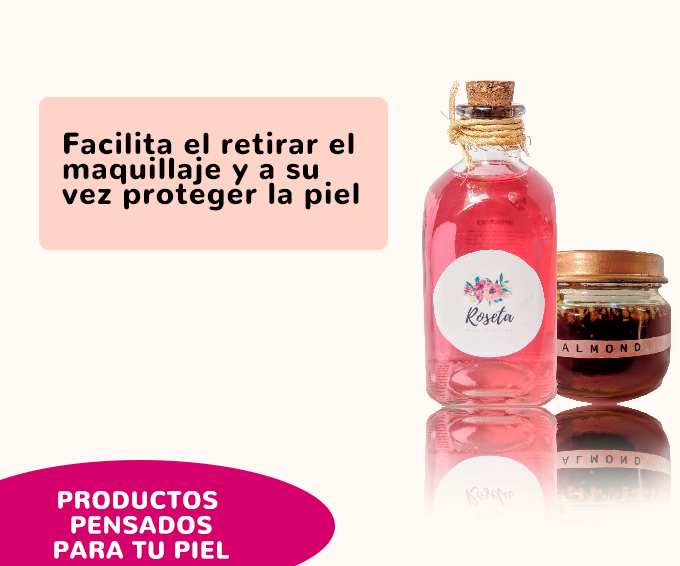
<style>
.page{position:relative;width:680px;height:566px;background:#fffaf5}
.page>*{position:absolute;margin:0}
.t1{font:30px/12.5px "Nunito-Black";letter-spacing:0.04em;color:#000000}
.t2{font:24px/12.5px "Nunito-Black";letter-spacing:0.04em;color:#ffffff}
</style>
<div class="page">
<p class="t1" style="left:62px;top:131px;width:297px;height:80px">Facilita el retirar el<br><br>maquillaje y a su <br><br>vez proteger la piel</p>
<p class="t2" style="left:54px;top:491px;width:175px;height:68px;text-align:center">PRODUCTOS <br><br>PENSADOS<br><br>PARA TU PIEL</p>
</div>
